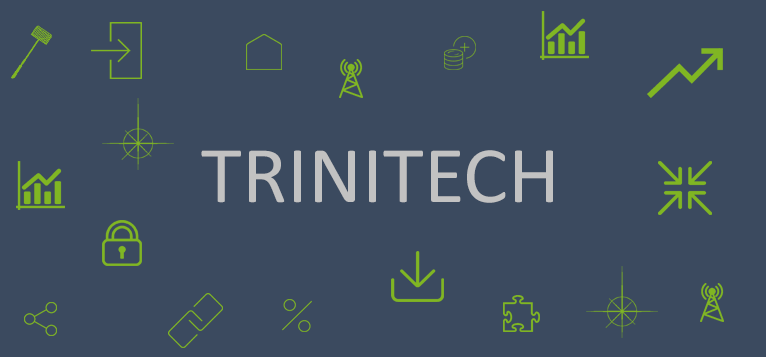
<style>
.page{position:relative;width:766px;height:357px;background:#3b4a5f}
.page>*{position:absolute;margin:0}
.t1{font:81px "Calibri";color:#c2c2c2;scale:1.03 1}
</style>
<div class="page">
<p class="t1" style="left:201px;top:150px;width:352px;height:53px">TRINITECH</p>
</div>
